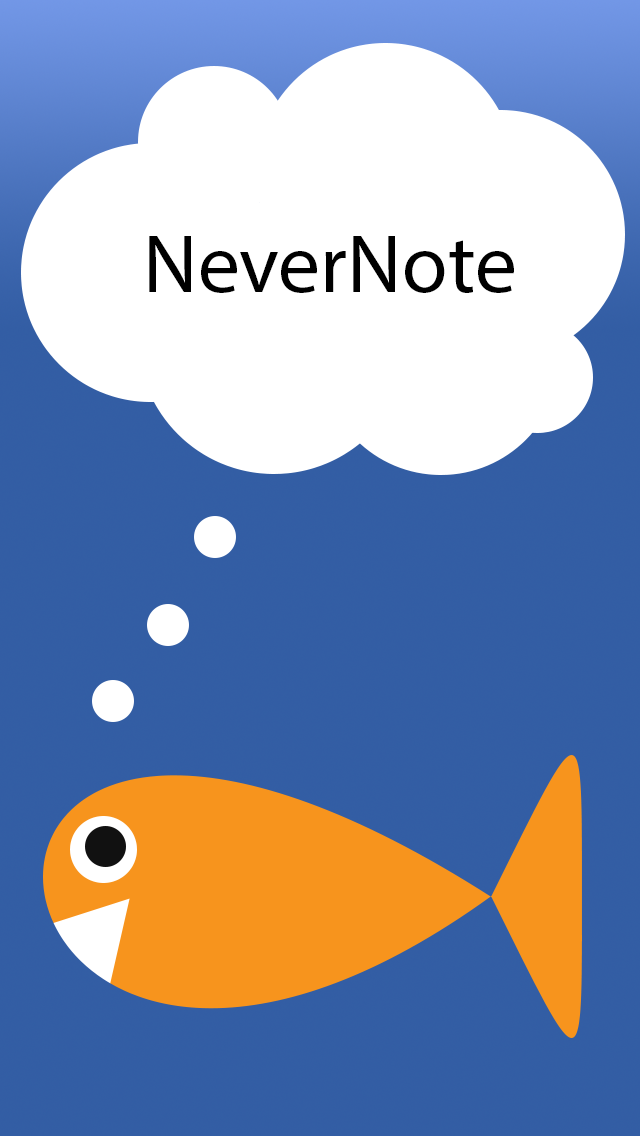
<style>
.page{position:relative;width:640px;height:1136px;background:#ffffff}
.page>*{position:absolute;margin:0}
.t1{font:83.1px "MyriadPro-Regular";color:#000000}
</style>
<div class="page">
<p class="t1" style="left:149px;top:236px;width:365px;height:57px">NeverNote</p>
</div>
